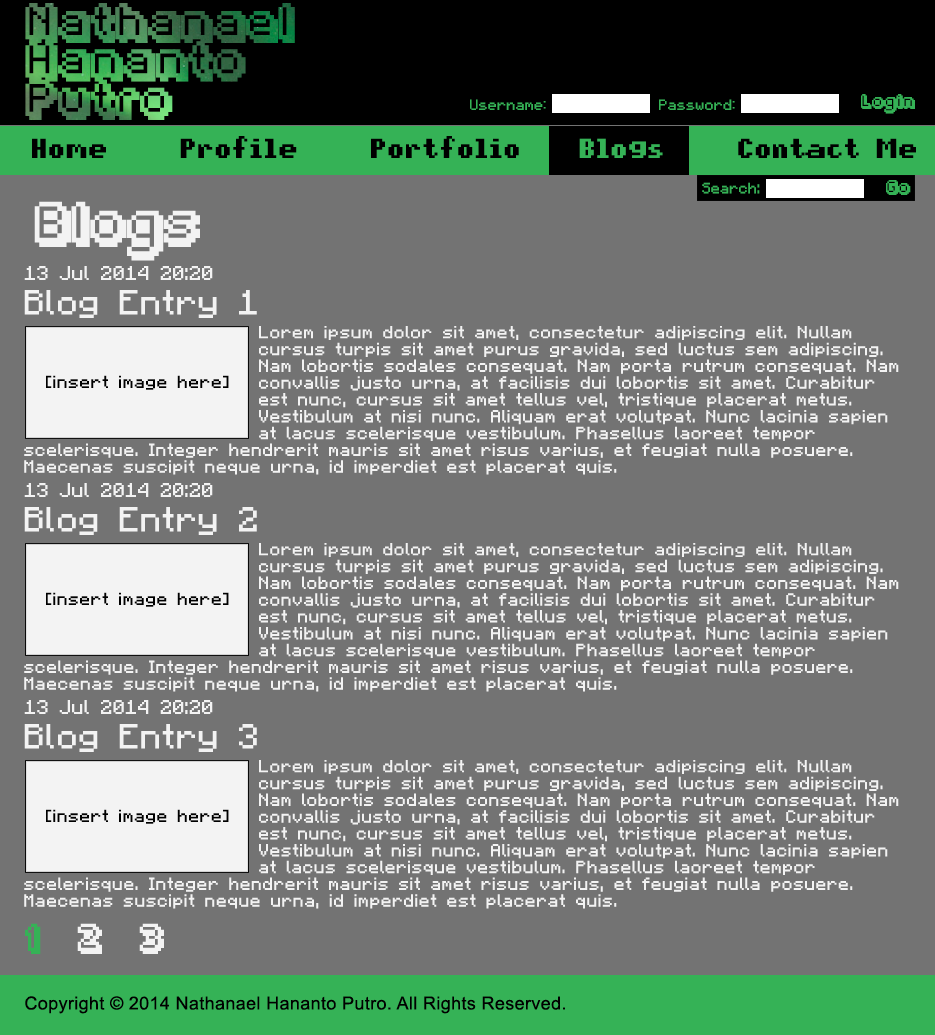
<style>
.page{position:relative;width:935px;height:1035px;background:#737373}
.page>*{position:absolute;margin:0}
.t1{font:32px "Fipps-Regular";letter-spacing:0.02em}
.t2{font:12px "pixelmix";letter-spacing:0.02em;color:#35b256}
.t3{font:12px "Fipps-Regular";letter-spacing:0.02em;color:#35b256}
.t4{font:22px "pixelmix-bold";letter-spacing:0.02em;color:#000000}
.t5{font:22px "pixelmix-bold";letter-spacing:0.02em;color:#35b256}
.t6{font:12px "Minecraftia";letter-spacing:0.02em;color:#35b256}
.t7{font:36px "Fipps-Regular";letter-spacing:0.02em;color:#f3f3f3}
.t8{font:16px "Minecraftia";letter-spacing:0.02em;color:#f3f3f3}
.t9{font:28px "Minecraftia";letter-spacing:0.02em;color:#f3f3f3}
.t10{font:14px "Minecraftia";letter-spacing:0.02em;color:#f3f3f3}
.t11{font:14px "Minecraftia";letter-spacing:0.02em;color:#35b256}
.t12{font:14px "Minecraftia";letter-spacing:0.02em;color:#000000}
.t13{font:24px "Fipps-Regular";letter-spacing:0.02em;color:#f3f3f3}
.t14{font:24px "Fipps-Regular";letter-spacing:0.02em;color:#35b256}
.t15{font:18px "ArialMT";letter-spacing:0.02em;color:#000000}
</style>
<div class="page">
<p class="t1" style="left:25px;top:3px;width:270px;height:117px">Nathanael<br>Hananto<br>Putro</p>
<p class="t2" style="left:470px;top:99px;width:76px;height:11px">Username:</p>
<p class="t2" style="left:659px;top:99px;width:76px;height:11px">Password:</p>
<p class="t3" style="left:861px;top:94px;width:54px;height:20px">Login</p>
<p class="t4" style="left:32px;top:136px;width:884px;height:22px">Home     Profile     Portfolio    <span class="t5">Blogs</span>     Contact Me</p>
<p class="t6" style="left:702px;top:182px;width:58px;height:12px">Search:</p>
<p class="t3" style="left:886px;top:180px;width:25px;height:15px">Go</p>
<p class="t7" style="left:34px;top:201px;width:166px;height:60px">Blogs</p>
<p class="t8" style="left:24px;top:266px;width:189px;height:14px">13 Jul 2014 20:20</p>
<p class="t9" style="left:24px;top:290px;width:233px;height:28px">Blog Entry 1</p>
<p class="t10" style="left:24px;top:326px;width:875px;height:149px"><span class="t11">        </span>Lorem ipsum dolor sit amet, consectetur adipiscing elit. Nullam<br>        cursus turpis sit amet purus gravida, sed luctus sem adipiscing.<br>        Nam lobortis sodales consequat. Nam porta rutrum consequat. Nam<br>        convallis justo urna, at facilisis dui lobortis sit amet. Curabitur<br>        est nunc, cursus sit amet tellus vel, tristique placerat metus.<br>        Vestibulum at nisi nunc. Aliquam erat volutpat. Nunc lacinia sapien<br>        at lacus scelerisque vestibulum. Phasellus laoreet tempor<br>scelerisque. Integer hendrerit mauris sit amet risus varius, et feugiat nulla posuere. Maecenas suscipit neque urna, id imperdiet est placerat quis.</p>
<p class="t12" style="left:46px;top:375px;width:183px;height:15px">[insert image here]</p>
<p class="t8" style="left:24px;top:483px;width:189px;height:14px">13 Jul 2014 20:20</p>
<p class="t9" style="left:24px;top:507px;width:233px;height:28px">Blog Entry 2</p>
<p class="t10" style="left:24px;top:543px;width:875px;height:149px"><span class="t11">        </span>Lorem ipsum dolor sit amet, consectetur adipiscing elit. Nullam<br>        cursus turpis sit amet purus gravida, sed luctus sem adipiscing.<br>        Nam lobortis sodales consequat. Nam porta rutrum consequat. Nam<br>        convallis justo urna, at facilisis dui lobortis sit amet. Curabitur<br>        est nunc, cursus sit amet tellus vel, tristique placerat metus.<br>        Vestibulum at nisi nunc. Aliquam erat volutpat. Nunc lacinia sapien<br>        at lacus scelerisque vestibulum. Phasellus laoreet tempor<br>scelerisque. Integer hendrerit mauris sit amet risus varius, et feugiat nulla posuere. Maecenas suscipit neque urna, id imperdiet est placerat quis.</p>
<p class="t12" style="left:46px;top:592px;width:183px;height:15px">[insert image here]</p>
<p class="t8" style="left:24px;top:700px;width:189px;height:14px">13 Jul 2014 20:20</p>
<p class="t9" style="left:24px;top:724px;width:233px;height:28px">Blog Entry 3</p>
<p class="t10" style="left:24px;top:760px;width:875px;height:149px"><span class="t11">        </span>Lorem ipsum dolor sit amet, consectetur adipiscing elit. Nullam<br>        cursus turpis sit amet purus gravida, sed luctus sem adipiscing.<br>        Nam lobortis sodales consequat. Nam porta rutrum consequat. Nam<br>        convallis justo urna, at facilisis dui lobortis sit amet. Curabitur<br>        est nunc, cursus sit amet tellus vel, tristique placerat metus.<br>        Vestibulum at nisi nunc. Aliquam erat volutpat. Nunc lacinia sapien<br>        at lacus scelerisque vestibulum. Phasellus laoreet tempor<br>scelerisque. Integer hendrerit mauris sit amet risus varius, et feugiat nulla posuere. Maecenas suscipit neque urna, id imperdiet est placerat quis.</p>
<p class="t12" style="left:46px;top:809px;width:183px;height:15px">[insert image here]</p>
<p class="t13" style="left:25px;top:923px;width:139px;height:31px"><span class="t14">1 </span>  2   3</p>
<p class="t15" style="left:25px;top:996px;width:540px;height:18px">Copyright © 2014 Nathanael Hananto Putro. All Rights Reserved.</p>
</div>
